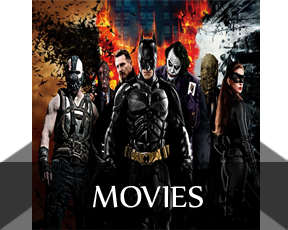
<style>
.page{position:relative;width:288px;height:230px}
.page>*{position:absolute;margin:0}
.t1{font:36.4px "Nyala-Regular";color:#ffffff}
</style>
<div class="page">
<p class="t1" style="left:93px;top:185px;width:110px;height:23px">MOVIES</p>
</div>
